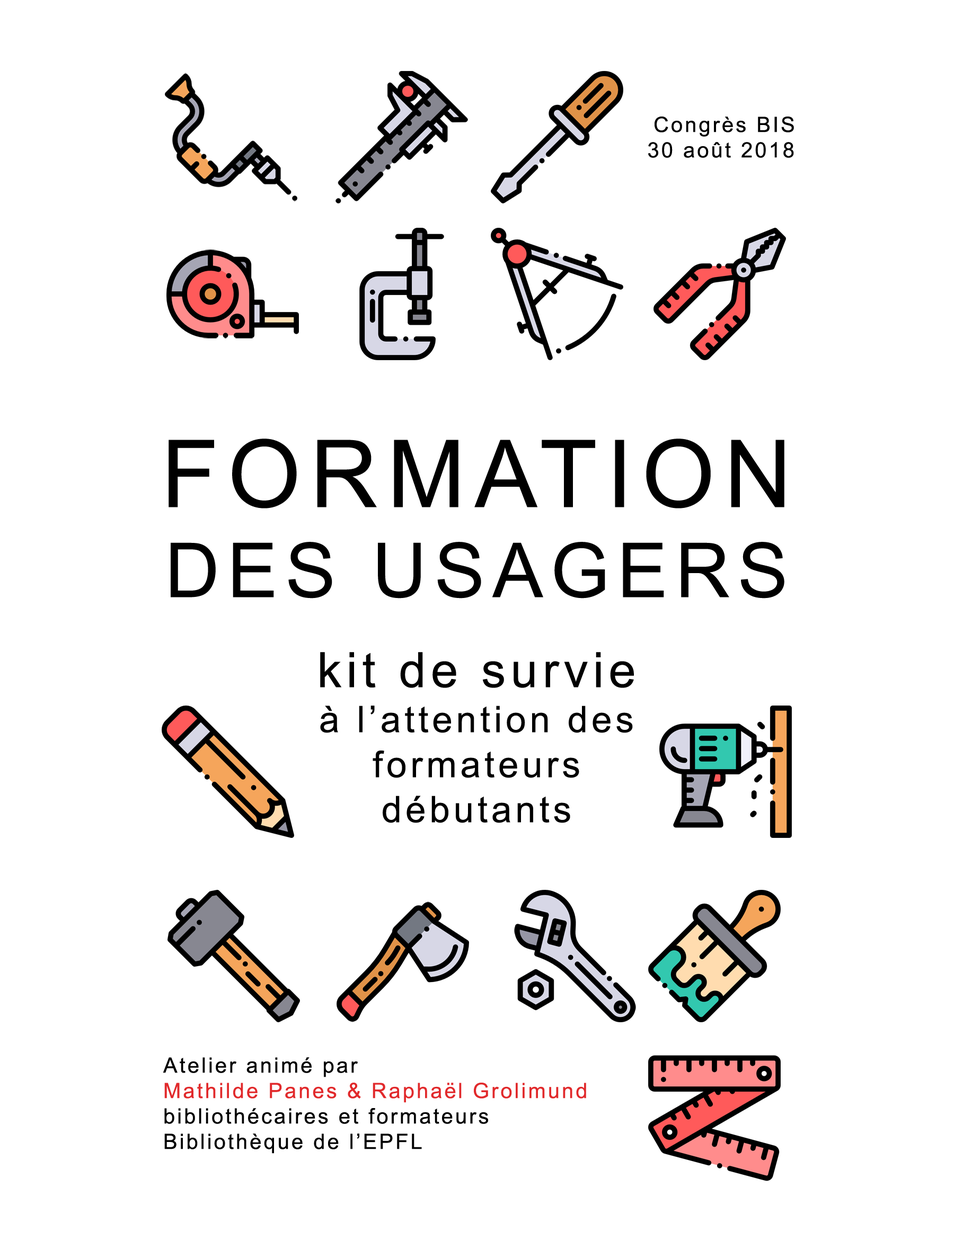
<style>
.page{position:relative;width:954px;height:1250px;background:#ffffff}
.page>*{position:absolute;margin:0}
.t1{font:21.2px "ArialMT";letter-spacing:0.1em;color:#000000}
.t2{font:36.6px/45px "ArialMT";letter-spacing:0.1em;color:#000000}
.t3{font:93.8px/90.1px "ArialMT";letter-spacing:0.1em;color:#000000}
.t4{font:75.8px/90.1px "ArialMT";letter-spacing:0.1em;color:#000000}
.t5{font:48.7px/90.1px "ArialMT";letter-spacing:0.1em;color:#000000}
.t6{font:21.2px "ArialMT";letter-spacing:0.1em;color:#e1292b}
</style>
<div class="page">
<p class="t1" style="left:648px;top:117px;width:146px;height:41px;text-align:right">Congrès BIS<br>30 août 2018</p>
<p class="t2" style="left:168px;top:439px;width:616px;height:384px;text-align:center"><span class="t3">FORMATION<br></span><span class="t4">DES USAGERS<br></span><span class="t5">kit de survie<br></span>à l’attention des<br>formateurs<br>débutants</p>
<p class="t1" style="left:163px;top:1058px;width:423px;height:96px">Atelier animé par<br><span class="t6">Mathilde Panes &amp; Raphaël Grolimund<br></span>bibliothécaires et formateurs<br>Bibliothèque de l’EPFL</p>
</div>
